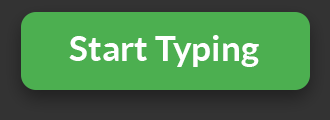
<style>
.page{position:relative;width:330px;height:120px;background:#4caf50}
.page>*{position:absolute;margin:0}
.t1{font:35.5px "Lato-Bold";color:#ffffff}
</style>
<div class="page">
<p class="t1" style="left:69px;top:35px;width:190px;height:32px">Start Typing</p>
</div>
